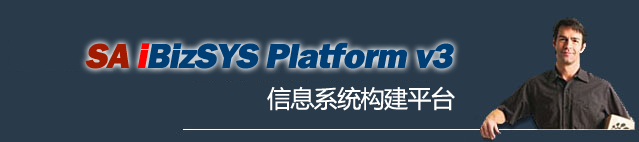
<style>
.page{position:relative;width:639px;height:142px;background:#293a4a}
.page>*{position:absolute;margin:0}
.t1{font:36px "FranklinGothic-Heavy";letter-spacing:-0.025em;color:#003f76;font-style:italic}
.t2{font:36px "FranklinGothic-Heavy";letter-spacing:-0.025em;color:#a01b00;font-style:italic}
.t3{font:36px "FranklinGothic-Heavy";letter-spacing:-0.025em;color:#ff0000;font-style:italic}
.t4{font:24px "MicrosoftYaHei";letter-spacing:-0.025em;color:#ffffff}
</style>
<div class="page">
<p class="t1" style="left:85px;top:42px;width:369px;height:27px"><span class="t2">SA </span><span class="t3">i</span>BizSYS Platform v3</p>
<p class="t4" style="left:267px;top:86px;width:188px;height:25px">信息系统构建平台</p>
</div>
